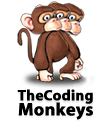
<style>
.page{position:relative;width:112px;height:133px;background:#ffffff}
.page>*{position:absolute;margin:0}
.t1{font:14.9px "Myriad-Bold";color:#000000;font-weight:bold}
.t2{font:18.1px "Myriad-Bold";color:#000000;font-weight:bold}
</style>
<div class="page">
<p class="t1" style="left:17px;top:89px;width:76px;height:15px">TheCoding</p>
<p class="t2" style="left:18px;top:102px;width:75px;height:18px">Monkeys</p>
</div>
